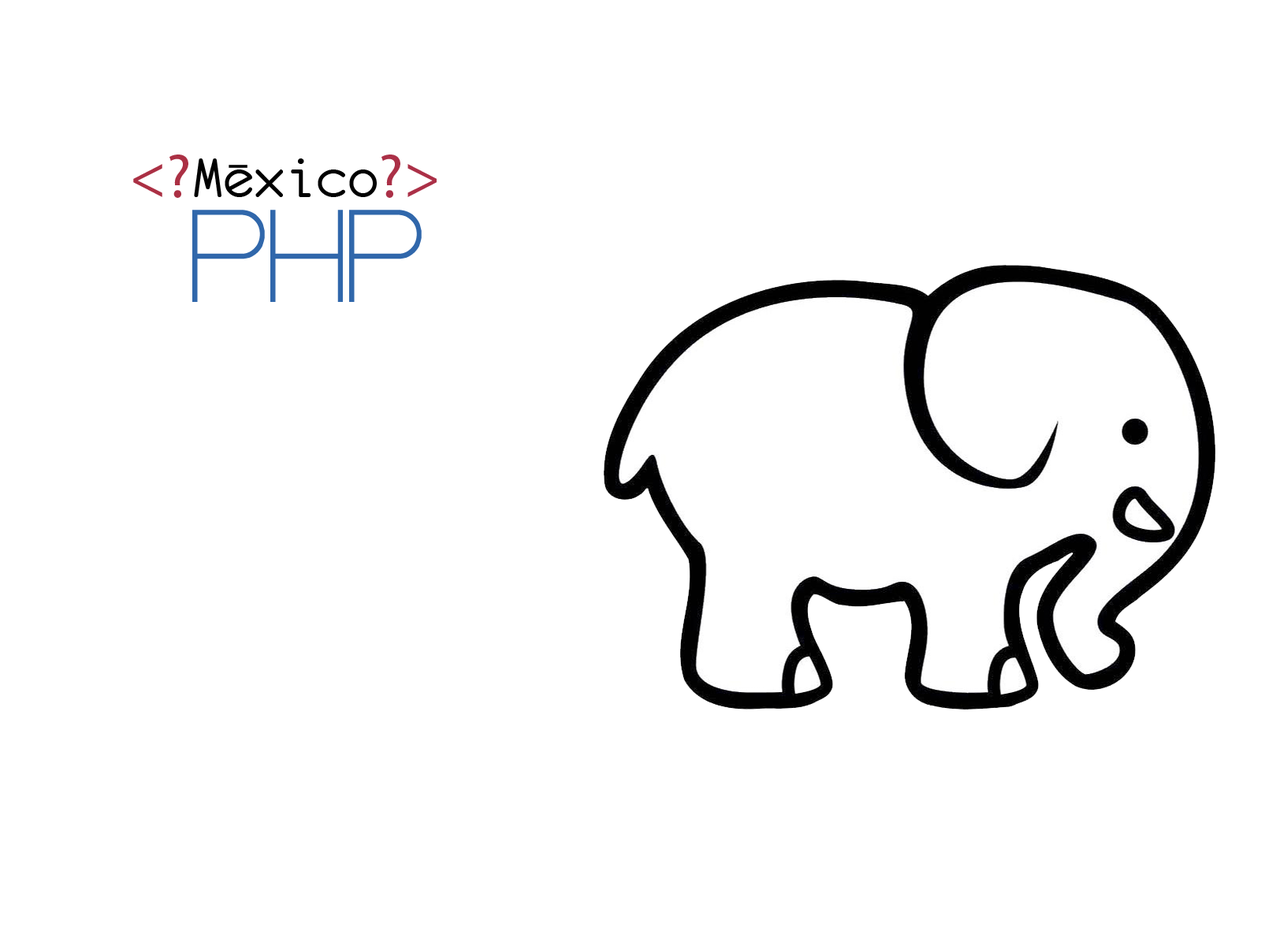
<style>
.page{position:relative;width:1261px;height:946px;background:#ffffff}
.page>*{position:absolute;margin:0}
.t1{font:62.2px "Monofur";color:#000000}
.t2{font:62.2px "MyriadPro-Regular";color:#ab3044}
.t3{font:62.2px "MyriadPro-Regular";color:#ab3047}
.t4{font:109.2px "Steiner";color:#3067ab}
</style>
<div class="page">
<p class="t1" style="left:133px;top:154px;width:304px;height:44px"><span class="t2">&lt;?</span>Mexico<span class="t3">?&gt;</span></p>
<p class="t4" style="left:192px;top:210px;width:230px;height:92px">PHP</p>
</div>
